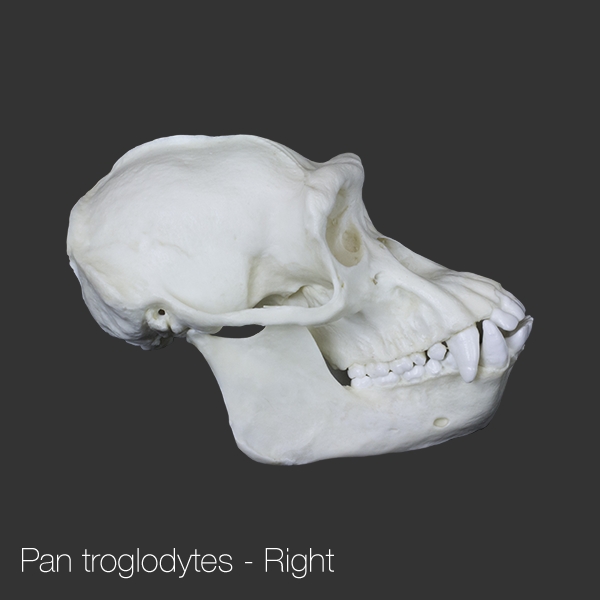
<style>
.page{position:relative;width:600px;height:600px;background:#333333}
.page>*{position:absolute;margin:0}
.t1{font:33.3px "HelveticaNeue-Thin";color:#ffffff}
</style>
<div class="page">
<p class="t1" style="left:22px;top:548px;width:312px;height:31px">Pan troglodytes - Right</p>
</div>
